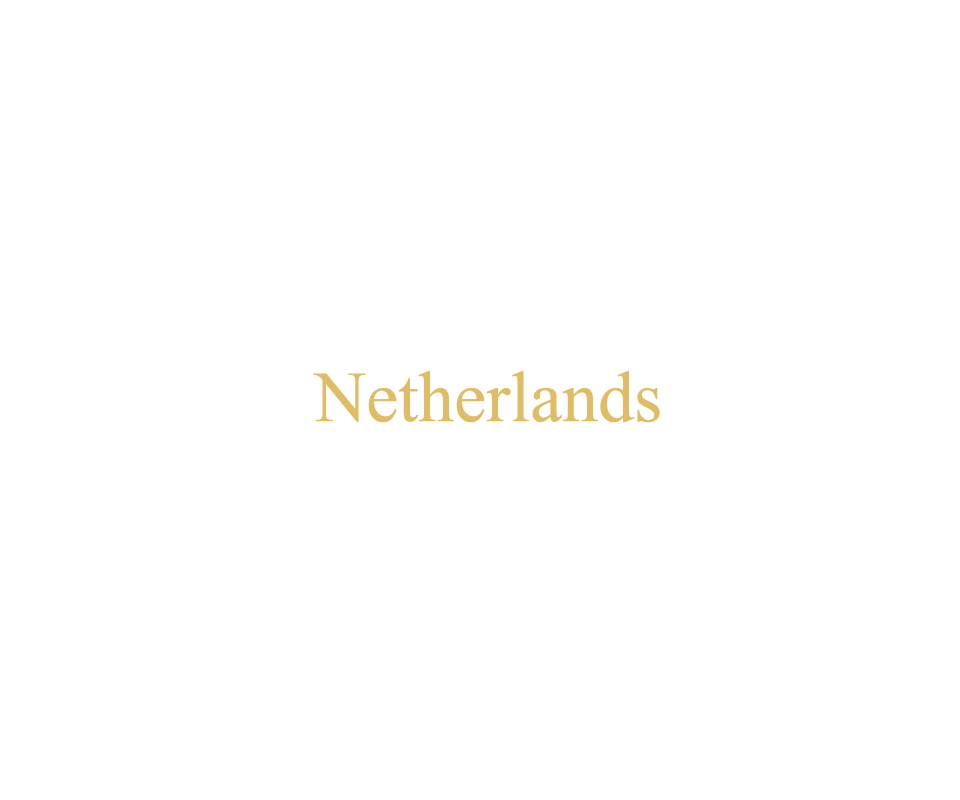
<style>
.page{position:relative;width:960px;height:800px;background:#ffffff}
.page>*{position:absolute;margin:0}
.t1{font:72px "TimesNewRomanPSMT";color:#e0bc64}
</style>
<div class="page">
<p class="t1" style="left:313px;top:371px;width:347px;height:52px">Netherlands</p>
</div>
